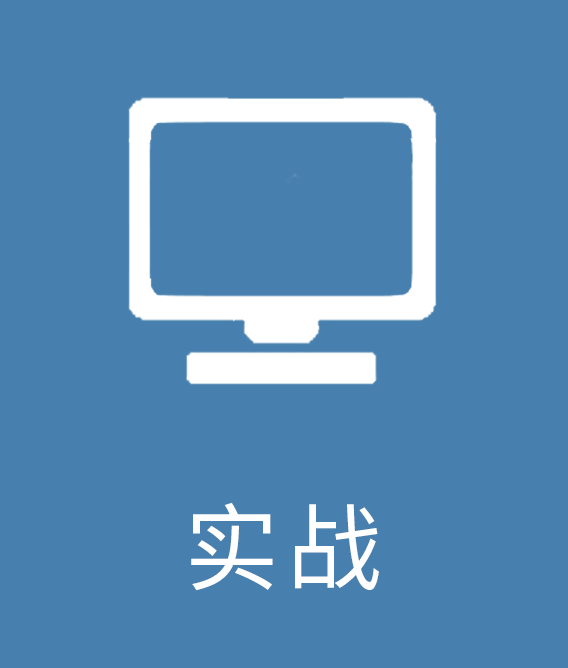
<style>
.page{position:relative;width:568px;height:668px;background:#4780ae}
.page>*{position:absolute;margin:0}
.t1{font:95px "NotoSansSC-Regular";letter-spacing:0.08em;color:#ffffff}
</style>
<div class="page">
<p class="t1" style="left:191px;top:502px;width:188px;height:89px">实战</p>
</div>
